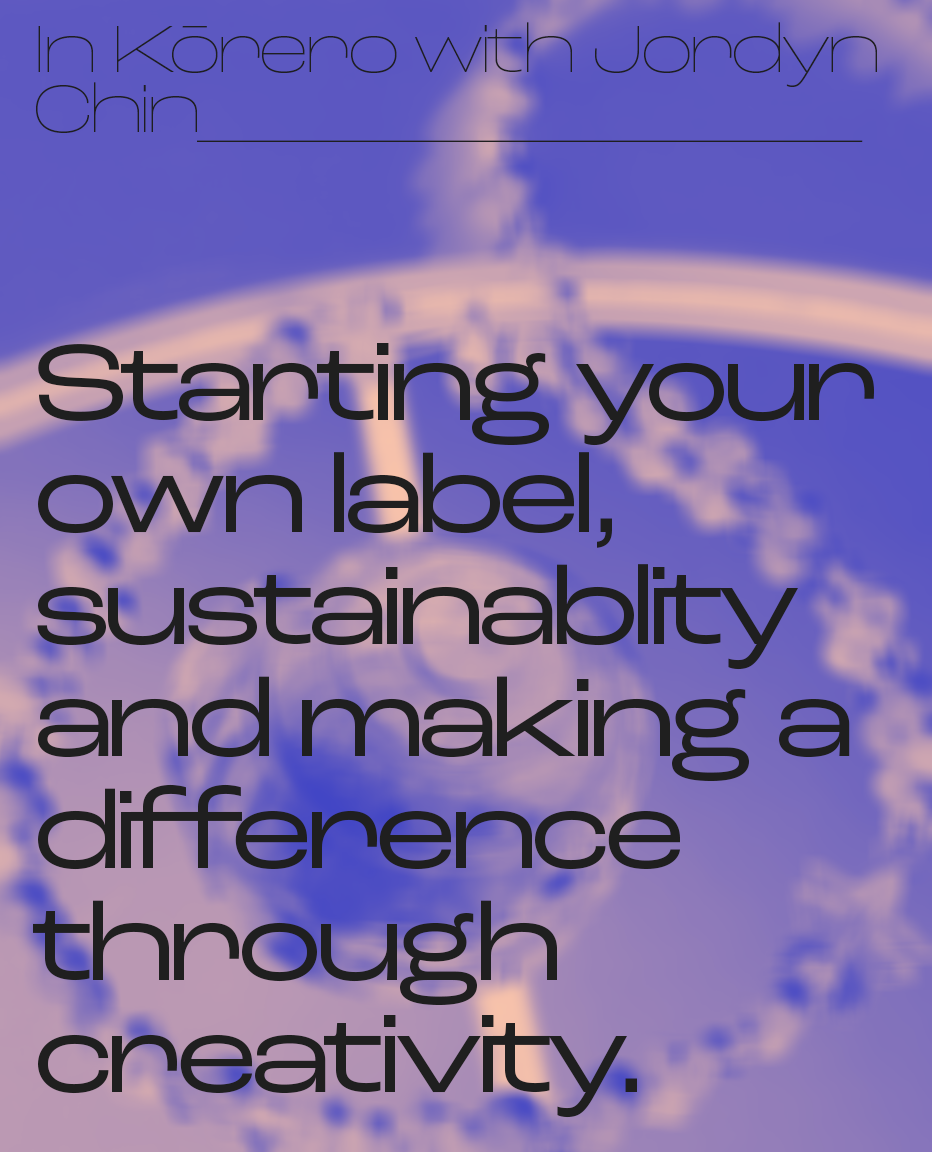
<style>
.page{position:relative;width:932px;height:1152px}
.page>*{position:absolute;margin:0}
.t1{font:114px/112px "RocGrotesk-Wide";letter-spacing:-0.075em;color:#1f1f1f}
.t2{font:70px/60px "RocGrotesk-WideThin";letter-spacing:-0.075em;color:#1f1f1f}
</style>
<div class="page">
<p class="t1" style="left:33px;top:22px;width:844px;height:1096px"><span class="t2">In Kōrero with Jordyn Chin_____________<br><br><br><br></span>Starting your own label, sustainablity and making a difference through creativity.</p>
</div>
